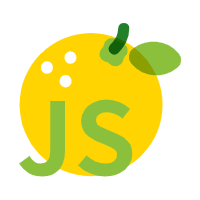
<style>
.page{position:relative;width:200px;height:200px;background:#ffffff}
.page>*{position:absolute;margin:0}
.t1{font:100px "SourceHanSansSC-Bold";color:#8bc03c}
</style>
<div class="page">
<p class="t1" style="left:19px;top:99px;width:114px;height:78px">JS</p>
</div>
